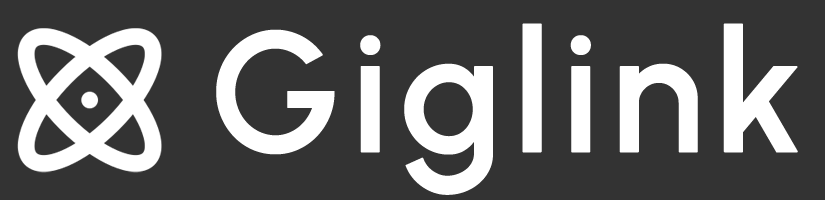
<style>
.page{position:relative;width:825px;height:200px;background:#333333}
.page>*{position:absolute;margin:0}
.t1{font:170px "Urbanist-SemiBold";letter-spacing:0.035em;color:#ffffff;font-weight:bold}
</style>
<div class="page">
<p class="t1" style="left:216px;top:23px;width:582px;height:172px">Giglink</p>
</div>
